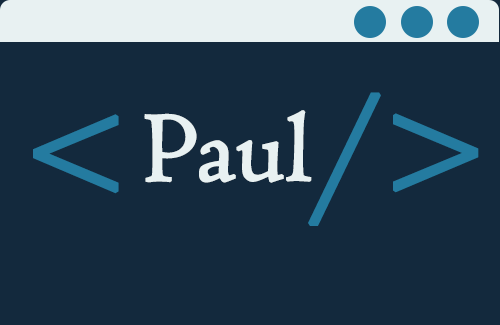
<style>
.page{position:relative;width:500px;height:325px;background:#13293d}
.page>*{position:absolute;margin:0}
.t1{font:145.7px "Centaur";color:#247ba0;font-weight:bold}
.t2{font:121.4px "Centaur";color:#000000;font-weight:bold}
.t3{font:101.2px "Centaur";color:#e8f1f2;font-weight:bold}
</style>
<div class="page">
<p class="t1" style="left:308px;top:92px;width:171px;height:134px"><span class="t2"> </span>/&gt;</p>
<p class="t3" style="left:144px;top:110px;width:168px;height:73px">Paul</p>
<p class="t1" style="left:33px;top:114px;width:86px;height:80px">&lt;</p>
</div>
